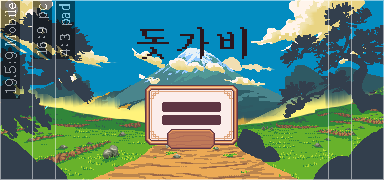
<style>
.page{position:relative;width:384px;height:180px;background:#038cc0}
.page>*{position:absolute;margin:0}
.t1{font:14px "AdobeMyungjoStd-Medium"}
.t2{font:15px "D2Codingligature"}
.t3{font:40px "Sam3KRFont";color:#2c171e}
</style>
<div class="page">
<p class="t1" style="left:4px;top:3px;width:13px;height:90px;rotate:-90deg">19.5:9 Mobile</p>
<p class="t2" style="left:37px;top:4px;width:12px;height:51px;rotate:-90deg">16:9 pc</p>
<p class="t2" style="left:59px;top:4px;width:13px;height:52px;rotate:-90deg">4:3 pad</p>
<p class="t3" style="left:137px;top:27px;width:110px;height:32px">돗가비</p>
</div>
